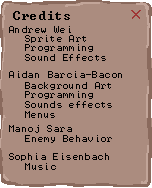
<style>
.page{position:relative;width:152px;height:188px;background:#ab8c7f}
.page>*{position:absolute;margin:0}
.t1{font:12px "Terminal";letter-spacing:0.04em;color:#000000}
.t2{font:10px "Terminal";letter-spacing:0.04em;color:#000000}
.t3{font:8px "Terminal";letter-spacing:0.04em;color:#000000}
</style>
<div class="page">
<p class="t1" style="left:13px;top:11px;width:57px;height:9px">Credits</p>
<p class="t2" style="left:9px;top:26px;width:62px;height:7px">Andrew Wei</p>
<p class="t3" style="left:25px;top:35px;width:81px;height:26px">Sprite Art<br>Programming<br>Sound Effects</p>
<p class="t2" style="left:9px;top:71px;width:113px;height:7px">Aidan Barcia-Bacon</p>
<p class="t3" style="left:25px;top:82px;width:87px;height:36px">Background Art<br>Programming<br>Sounds effects<br>Menus</p>
<p class="t2" style="left:9px;top:125px;width:63px;height:8px">Manoj Sara</p>
<p class="t3" style="left:25px;top:135px;width:87px;height:8px">Enemy Behavior</p>
<p class="t2" style="left:9px;top:153px;width:100px;height:8px">Sophia Eisenbach</p>
<p class="t3" style="left:25px;top:163px;width:31px;height:7px">Music</p>
</div>
